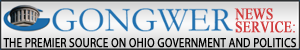
<style>
.page{position:relative;width:300px;height:50px}
.page>*{position:absolute;margin:0}
.t1{font:15.7px/13.1px "TimesNewRomanPSMT";color:#d03d3e;text-transform:uppercase;font-weight:bold;scale:0.83 1}
.t2{font:13.1px "MyriadPro-Regular";color:#000000;text-transform:uppercase;font-weight:bold;scale:0.83 1}
</style>
<div class="page">
<p class="t1" style="left:234px;top:8px;width:61px;height:25px">News<br>Service:</p>
<p class="t2" style="left:3px;top:38px;width:293px;height:10px">The Premier Source on ohio Government and Politics</p>
</div>
